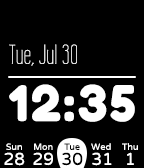
<style>
.page{position:relative;width:144px;height:168px;background:#000000}
.page>*{position:absolute;margin:0}
.t1{font:27px "WireOne";letter-spacing:0.01em;color:#ffffff}
.t2{font:48.9px "FredokaOne-Regular";letter-spacing:0.053em;color:#ffffff}
.t3{font:9px "VarelaRound-Regular";letter-spacing:0.01em;color:#ffffff}
.t4{font:9px "VarelaRound-Regular";letter-spacing:0.01em;color:#000000}
.t5{font:17px "VarelaRound-Regular";letter-spacing:0.01em;color:#ffffff}
.t6{font:17px "VarelaRound-Regular";letter-spacing:0.01em;color:#000000}
</style>
<div class="page">
<p class="t1" style="left:9px;top:44px;width:68px;height:22px">Tue, Jul 30</p>
<p class="t2" style="left:9px;top:84px;width:126px;height:38px">12:35</p>
<p class="t3" style="left:6px;top:143px;width:16px;height:7px">Sun</p>
<p class="t3" style="left:34px;top:143px;width:19px;height:7px">Mon</p>
<p class="t4" style="left:64px;top:143px;width:16px;height:7px">Tue</p>
<p class="t3" style="left:91px;top:143px;width:20px;height:7px">Wed</p>
<p class="t3" style="left:122px;top:143px;width:16px;height:7px">Thu</p>
<p class="t5" style="left:4px;top:152px;width:21px;height:14px">28</p>
<p class="t5" style="left:33px;top:152px;width:20px;height:14px">29</p>
<p class="t6" style="left:62px;top:152px;width:21px;height:14px">30</p>
<p class="t5" style="left:92px;top:152px;width:20px;height:14px">31</p>
<p class="t5" style="left:127px;top:152px;width:7px;height:13px">1</p>
</div>
